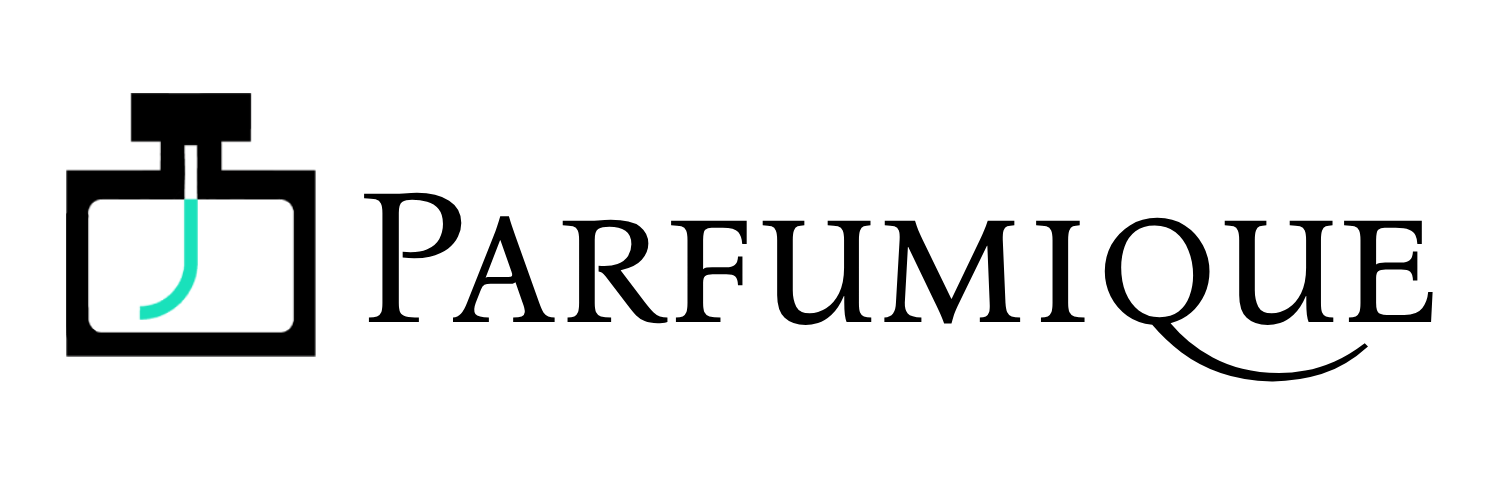
<style>
.page{position:relative;width:1500px;height:500px;background:#ffffff}
.page>*{position:absolute;margin:0}
.t1{font:192.8px "BonaNovaSC-Regular";color:#000000}
</style>
<div class="page">
<p class="t1" style="left:364px;top:192px;width:1069px;height:190px">Parfumique</p>
</div>
